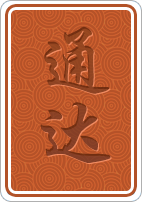
<style>
.page{position:relative;width:142px;height:202px}
.page>*{position:absolute;margin:0}
.t1{font:80px/72px "FZXKJW--GB1-0";letter-spacing:0.02em;color:#894122}
</style>
<div class="page">
<p class="t1" style="left:40px;top:26px;width:71px;height:137px">通<br>达</p>
</div>
